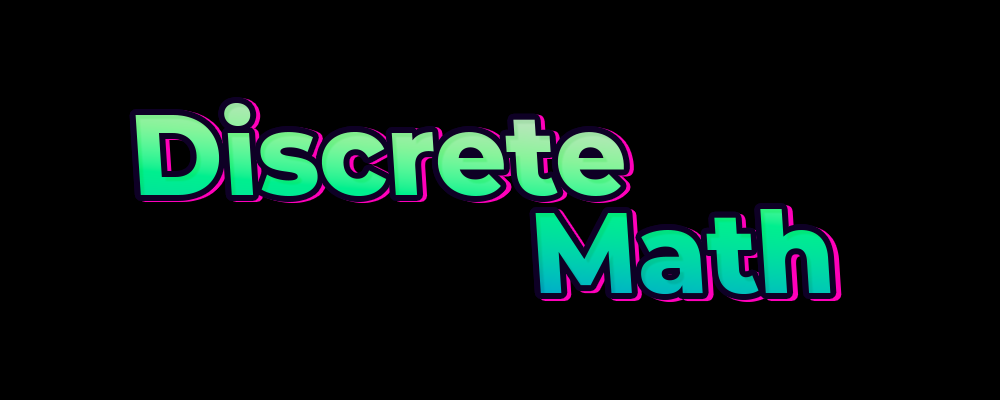
<style>
.page{position:relative;width:1000px;height:400px;background:#000000}
.page>*{position:absolute;margin:0}
.t1{font:114.1px "Montserrat-ExtraBold"}
</style>
<div class="page">
<p class="t1" style="left:135px;top:103px;width:489px;height:93px">Discrete</p>
<p class="t1" style="left:135px;top:103px;width:489px;height:93px">Discrete</p>
<p class="t1" style="left:139px;top:104px;width:489px;height:93px">Discrete</p>
<p class="t1" style="left:535px;top:209px;width:296px;height:86px">Math</p>
<p class="t1" style="left:535px;top:209px;width:296px;height:86px">Math</p>
<p class="t1" style="left:539px;top:211px;width:297px;height:86px">Math</p>
</div>
